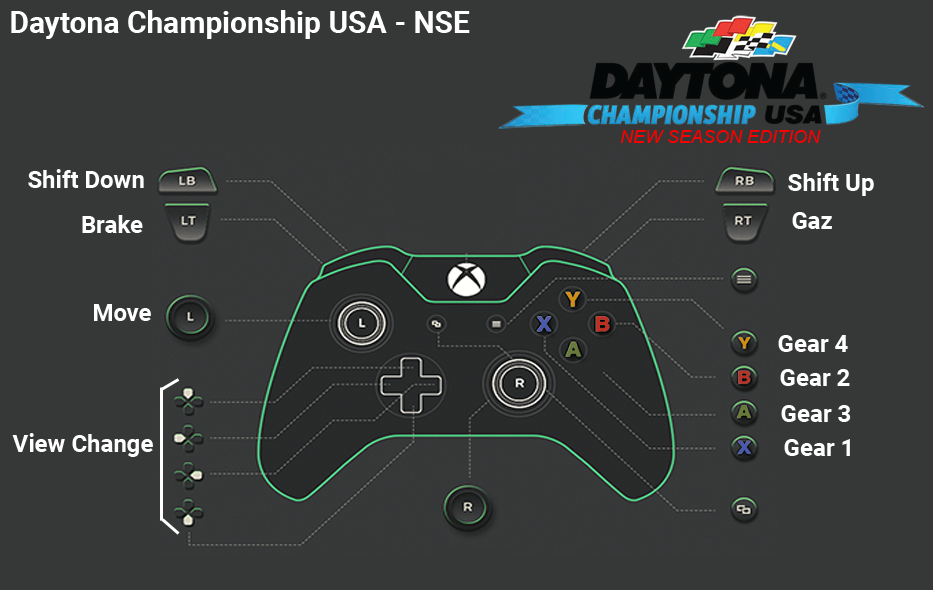
<style>
.page{position:relative;width:933px;height:590px;background:#363838}
.page>*{position:absolute;margin:0}
.t1{font:30px "Roboto-Bold";color:#ffffff}
.t2{font:18px "Arial-ItalicMT";color:#fb0000}
.t3{font:24px "Roboto-Bold";color:#ffffff}
</style>
<div class="page">
<p class="t1" style="left:11px;top:10px;width:459px;height:29px">Daytona Championship USA - NSE</p>
<p class="t2" style="left:621px;top:130px;width:200px;height:13px">NEW SEASON EDITION</p>
<p class="t3" style="left:28px;top:169px;width:116px;height:19px">Shift Down</p>
<p class="t3" style="left:788px;top:172px;width:86px;height:24px">Shift Up</p>
<p class="t3" style="left:82px;top:215px;width:61px;height:18px">Brake</p>
<p class="t3" style="left:792px;top:212px;width:40px;height:17px">Gaz</p>
<p class="t3" style="left:94px;top:304px;width:57px;height:17px">Move</p>
<p class="t3" style="left:778px;top:335px;width:70px;height:17px">Gear 4</p>
<p class="t3" style="left:780px;top:369px;width:70px;height:17px">Gear 2</p>
<p class="t3" style="left:781px;top:405px;width:70px;height:17px">Gear 3</p>
<p class="t3" style="left:12px;top:433px;width:141px;height:24px">View Change</p>
<p class="t3" style="left:784px;top:439px;width:66px;height:17px">Gear 1</p>
</div>
